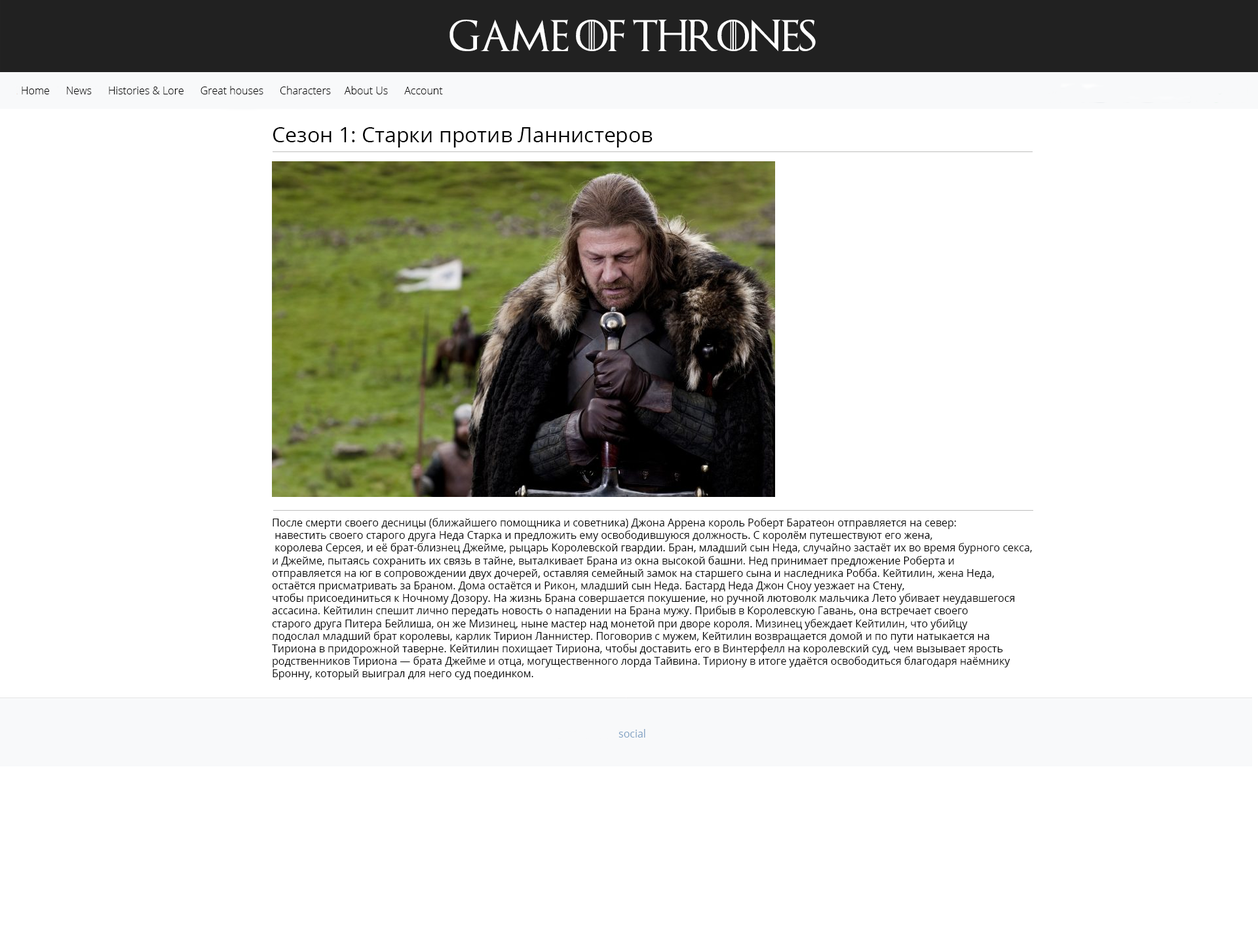
<style>
.page{position:relative;width:1258px;height:948px;background:#ffffff}
.page>*{position:absolute;margin:0}
.t1{font:31.5px "GameofThrones";color:#ffffff}
.t2{font:10.5px "OpenSans-Light";color:#000000}
.t3{font:21px "OpenSans-Regular";color:#000000}
.t4{font:10.5px "OpenSans-Regular";color:#000000}
.t5{font:10.5px "OpenSans-Regular";color:#83a3c4}
</style>
<div class="page">
<p class="t1" style="left:450px;top:20px;width:366px;height:31px">Game of Thrones</p>
<p class="t2" style="left:22px;top:86px;width:421px;height:8px">Home      News      Histories &amp; Lore      Great houses      Сharacters     About Us      Account</p>
<p class="t3" style="left:273px;top:127px;width:380px;height:20px">Сезон 1: Старки против Ланнистеров</p>
<p class="t4" style="left:272px;top:518px;width:760px;height:162px">После смерти своего десницы (ближайшего помощника и советника) Джона Аррена король Роберт Баратеон отправляется на север:<br> навестить своего старого друга Неда Старка и предложить ему освободившуюся должность. С королём путешествуют его жена,<br> королева Серсея, и её брат-близнец Джейме, рыцарь Королевской гвардии. Бран, младший сын Неда, случайно застаёт их во время бурного секса, <br>и Джейме, пытаясь сохранить их связь в тайне, выталкивает Брана из окна высокой башни. Нед принимает предложение Роберта и <br>отправляется на юг в сопровождении двух дочерей, оставляя семейный замок на старшего сына и наследника Робба. Кейтилин, жена Неда, <br>остаётся присматривать за Браном. Дома остаётся и Рикон, младший сын Неда. Бастард Неда Джон Сноу уезжает на Стену, <br>чтобы присоединиться к Ночному Дозору. На жизнь Брана совершается покушение, но ручной лютоволк мальчика Лето убивает неудавшегося <br>ассасина. Кейтилин спешит лично передать новость о нападении на Брана мужу. Прибыв в Королевскую Гавань, она встречает своего <br>старого друга Питера Бейлиша, он же Мизинец, ныне мастер над монетой при дворе короля. Мизинец убеждает Кейтилин, что убийцу <br>подослал младший брат королевы, карлик Тирион Ланнистер. Поговорив с мужем, Кейтилин возвращается домой и по пути натыкается на <br>Тириона в придорожной таверне. Кейтилин похищает Тириона, чтобы доставить его в Винтерфелл на королевский суд, чем вызывает ярость <br>родственников Тириона — брата Джейме и отца, могущественного лорда Тайвина. Тириону в итоге удаётся освободиться благодаря наёмнику <br>Бронну, который выиграл для него суд поединком.</p>
<p class="t5" style="left:619px;top:729px;width:27px;height:8px">social</p>
</div>
